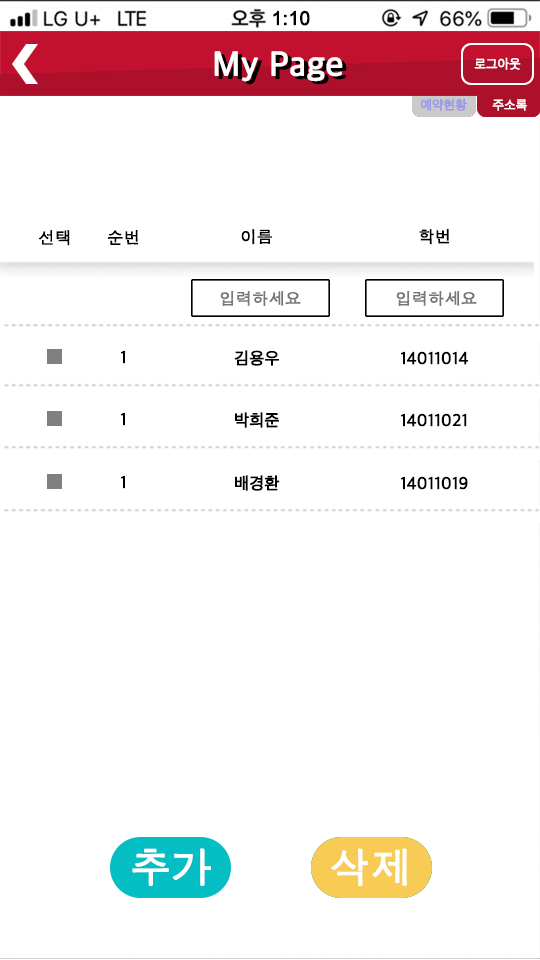
<style>
.page{position:relative;width:540px;height:960px;background:#ffffff}
.page>*{position:absolute;margin:0}
.t1{font:19px "ArialUnicodeMS";color:#000000;font-weight:bold}
.t2{font:35px "AppleSDGothicNeo-Regular";color:#ffffff;font-weight:bold}
.t3{font:13px "AppleSDGothicNeo-Regular";color:#ffffff;font-weight:bold}
.t4{font:13px "AppleSDGothicNeo-Regular";color:#9999ec;font-weight:bold}
.t5{font:16px "AppleGothic";color:#000000;font-weight:bold}
.t6{font:16px "AppleGothic";color:#767676;font-weight:bold}
.t7{font:17px "AppleSDGothicNeo-Regular";color:#000000;font-weight:bold}
.t8{font:40px "AppleGothic";color:#ffffff;font-weight:bold}
</style>
<div class="page">
<p class="t1" style="left:273px;top:10px;width:37px;height:16px">1:10</p>
<p class="t2" style="left:214px;top:51px;width:129px;height:31px">My Page</p>
<p class="t3" style="left:474px;top:57px;width:47px;height:13px">로그아웃</p>
<p class="t4" style="left:420px;top:98px;width:47px;height:13px">예약현황</p>
<p class="t3" style="left:492px;top:99px;width:35px;height:12px">주소록</p>
<p class="t5" style="left:38px;top:230px;width:32px;height:16px">선택</p>
<p class="t5" style="left:108px;top:230px;width:30px;height:15px">순번</p>
<p class="t5" style="left:241px;top:229px;width:31px;height:16px">이름</p>
<p class="t5" style="left:419px;top:229px;width:30px;height:16px">학번</p>
<p class="t6" style="left:220px;top:291px;width:81px;height:15px">입력하세요</p>
<p class="t6" style="left:396px;top:291px;width:81px;height:15px">입력하세요</p>
<p class="t7" style="left:121px;top:350px;width:4px;height:14px">1</p>
<p class="t7" style="left:234px;top:350px;width:45px;height:16px">김용우</p>
<p class="t7" style="left:401px;top:351px;width:67px;height:14px">14011014</p>
<p class="t7" style="left:121px;top:412px;width:4px;height:14px">1</p>
<p class="t7" style="left:235px;top:412px;width:44px;height:16px">박희준</p>
<p class="t7" style="left:401px;top:413px;width:66px;height:14px">14011021</p>
<p class="t7" style="left:121px;top:475px;width:4px;height:14px">1</p>
<p class="t7" style="left:235px;top:475px;width:45px;height:16px">배경환</p>
<p class="t7" style="left:401px;top:476px;width:67px;height:14px">14011019</p>
<p class="t8" style="left:132px;top:848px;width:79px;height:38px">추가</p>
<p class="t8" style="left:331px;top:848px;width:76px;height:38px">삭제</p>
</div>
